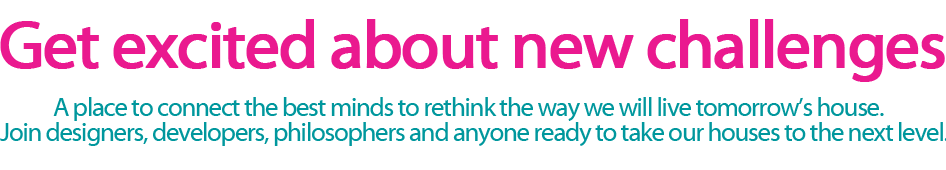
<style>
.page{position:relative;width:946px;height:170px;background:#ffffff}
.page>*{position:absolute;margin:0}
.t1{font:66.7px "MyriadWebPro";letter-spacing:-0.04em;color:#ea198f;font-weight:bold}
.t2{font:25.5px "MyriadWebPro";letter-spacing:-0.04em;color:#00979d}
</style>
<div class="page">
<p class="t1" style="left:0px;top:19px;width:945px;height:63px">Get excited about new challenges</p>
<p class="t2" style="left:53px;top:97px;width:831px;height:24px">A place to connect the best minds to rethink the way we will live tomorrow’s house.</p>
</div>
